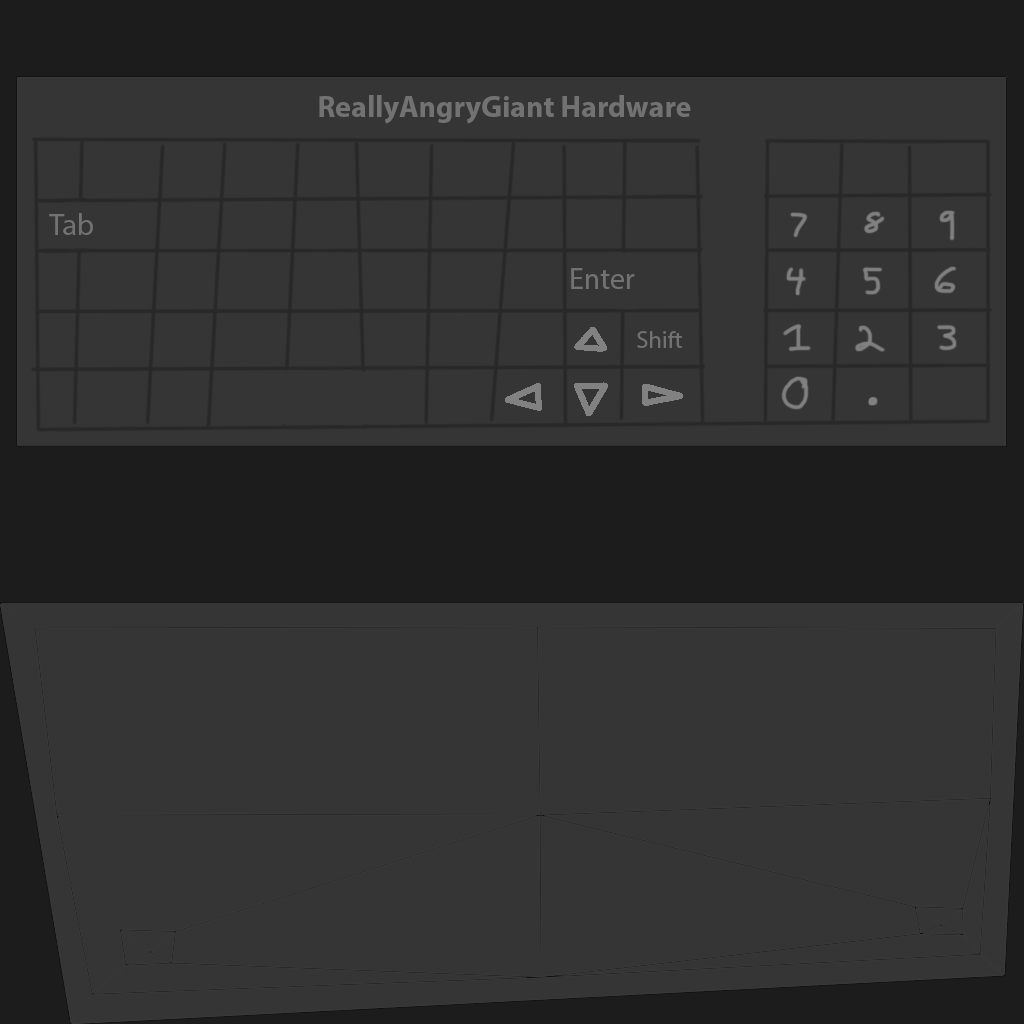
<style>
.page{position:relative;width:1024px;height:1024px;background:#353535}
.page>*{position:absolute;margin:0}
.t1{font:30px "MyriadPro-Bold";color:#616161}
.t2{font:30px "MyriadPro-Regular";color:#616161}
.t3{font:24px "MyriadPro-Regular";color:#616161}
</style>
<div class="page">
<p class="t1" style="left:319px;top:95px;width:372px;height:29px">ReallyAngryGiant Hardware</p>
<p class="t2" style="left:49px;top:213px;width:44px;height:22px">Tab</p>
<p class="t2" style="left:571px;top:268px;width:64px;height:21px">Enter</p>
<p class="t3" style="left:637px;top:331px;width:45px;height:17px">Shift</p>
</div>
